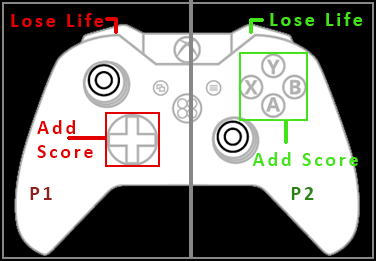
<style>
.page{position:relative;width:376px;height:261px;background:#ffffff}
.page>*{position:absolute;margin:0}
.t1{font:20px "Calibri-Bold";letter-spacing:0.14em;color:#e30000}
.t2{font:20px "Calibri-Bold";letter-spacing:0.14em;color:#43e319}
.t3{font:20px "Calibri-Bold";letter-spacing:0.14em;color:#921f20}
.t4{font:20px "Calibri-Bold";letter-spacing:0.14em;color:#298411}
</style>
<div class="page">
<p class="t1" style="left:11px;top:13px;width:92px;height:14px">Lose Life</p>
<p class="t2" style="left:270px;top:12px;width:92px;height:14px">Lose Life</p>
<p class="t1" style="left:37px;top:120px;width:56px;height:38px">Add Score</p>
<p class="t2" style="left:252px;top:152px;width:106px;height:14px">Add Score</p>
<p class="t3" style="left:30px;top:187px;width:22px;height:13px">P1</p>
<p class="t4" style="left:291px;top:187px;width:23px;height:13px">P2</p>
</div>
